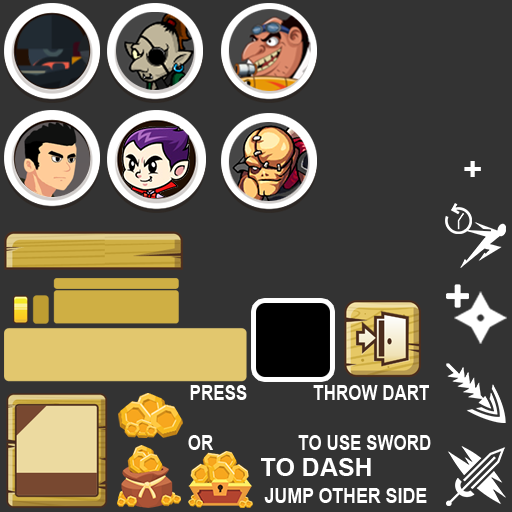
<style>
.page{position:relative;width:512px;height:512px;background:#333333}
.page>*{position:absolute;margin:0}
.t1{font:33.3px "Arial-BoldMT";color:#ffffff}
.t2{font:20.8px "Arial-BoldMT";color:#ffffff;scale:0.82 1}
.t3{font:25px "Arial-BoldMT";color:#ffffff}
.t4{font:20.8px "Arial-BoldMT";color:#ffffff;scale:0.85 1}
</style>
<div class="page">
<p class="t1" style="left:464px;top:161px;width:17px;height:16px">+</p>
<p class="t2" style="left:188px;top:385px;width:243px;height:65px;text-align:center">PRESS              THROW DART<br><br>OR                  TO USE SWORD</p>
<p class="t3" style="left:261px;top:458px;width:110px;height:18px">TO DASH</p>
<p class="t4" style="left:264px;top:488px;width:163px;height:15px">JUMP OTHER SIDE</p>
</div>
